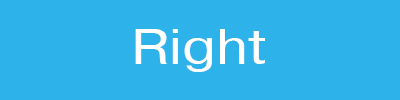
<style>
.page{position:relative;width:400px;height:100px;background:#2db2ea}
.page>*{position:absolute;margin:0}
.t1{font:48px "Helvetica";color:#ffffff;scale:1.2 1}
</style>
<div class="page">
<p class="t1" style="left:135px;top:29px;width:130px;height:43px">Right</p>
</div>
